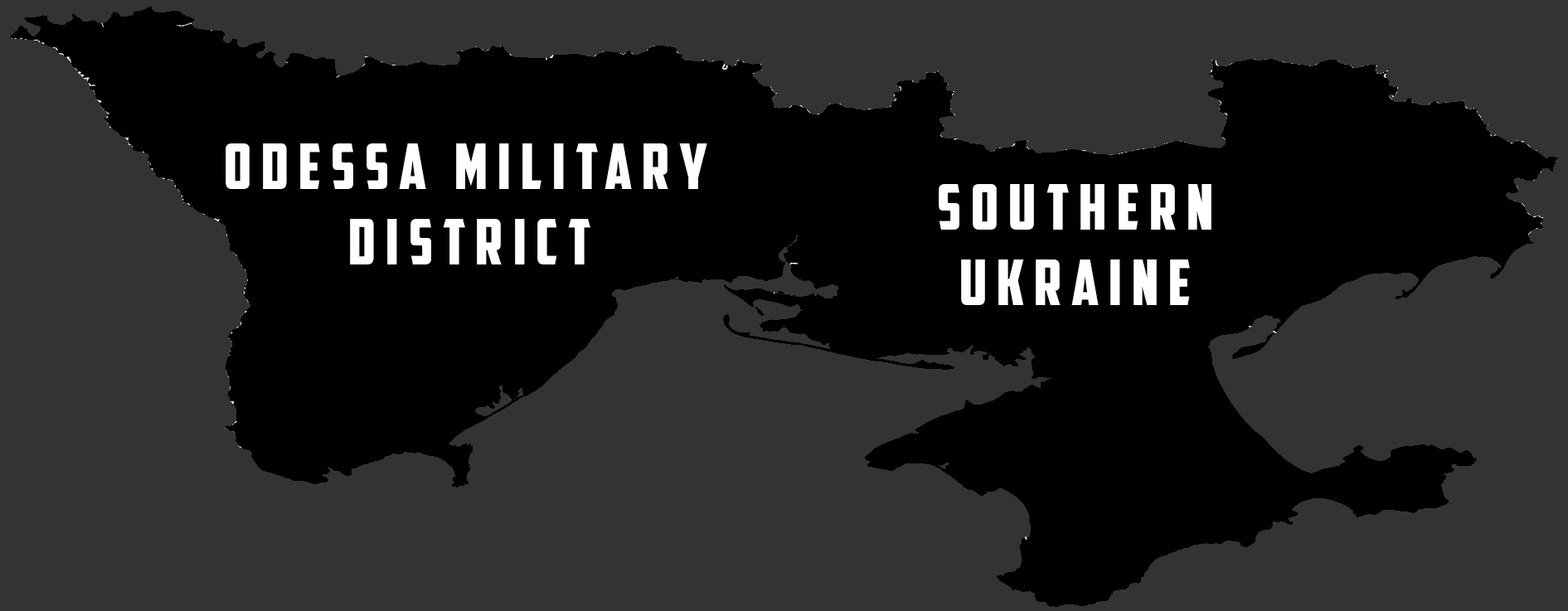
<style>
.page{position:relative;width:1568px;height:611px;background:#333333}
.page>*{position:absolute;margin:0}
.t1{font:63px "AmericanCaptain";letter-spacing:0.16em;color:#ffffff}
</style>
<div class="page">
<p class="t1" style="left:226px;top:143px;width:481px;height:122px;text-align:center">odessa military <br>district</p>
<p class="t1" style="left:939px;top:184px;width:272px;height:121px;text-align:center">Southern<br>ukraine</p>
</div>
